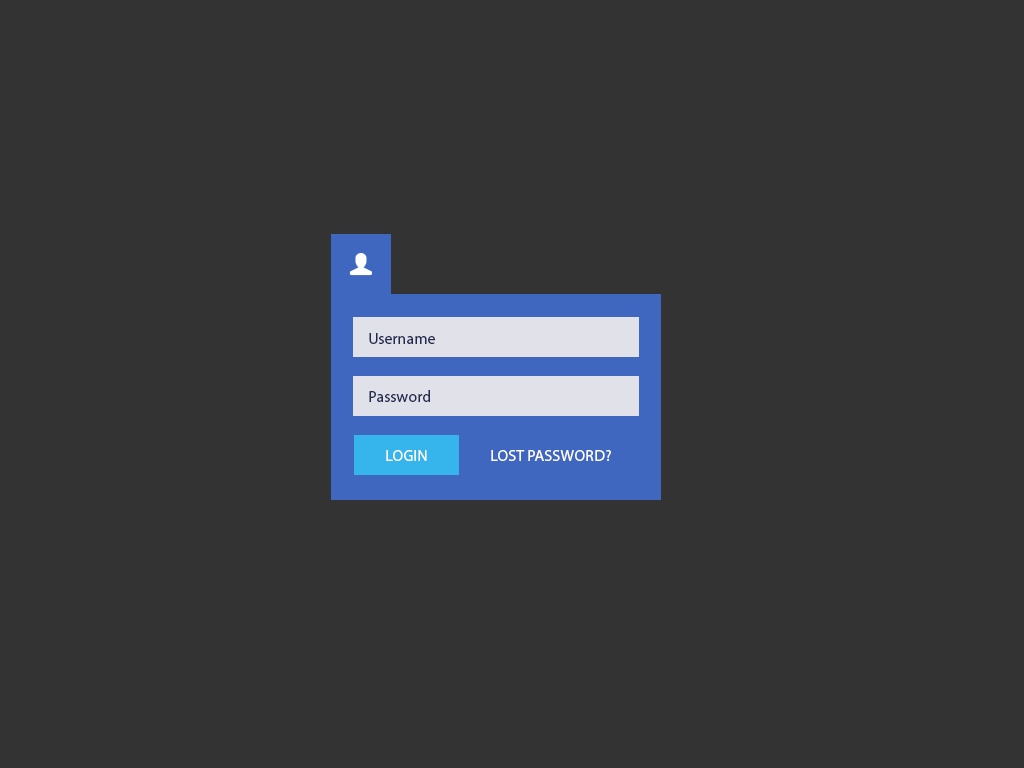
<style>
.page{position:relative;width:1024px;height:768px;background:#333333}
.page>*{position:absolute;margin:0}
.t1{font:16px "MyriadPro-Regular";color:#22284f}
.t2{font:16px "MyriadPro-Regular";color:#ffffff}
</style>
<div class="page">
<p class="t1" style="left:369px;top:333px;width:66px;height:11px">Username</p>
<p class="t1" style="left:369px;top:390px;width:61px;height:12px">Password</p>
<p class="t2" style="left:386px;top:450px;width:41px;height:11px">LOGIN</p>
<p class="t2" style="left:491px;top:450px;width:120px;height:11px">LOST PASSWORD?</p>
</div>
